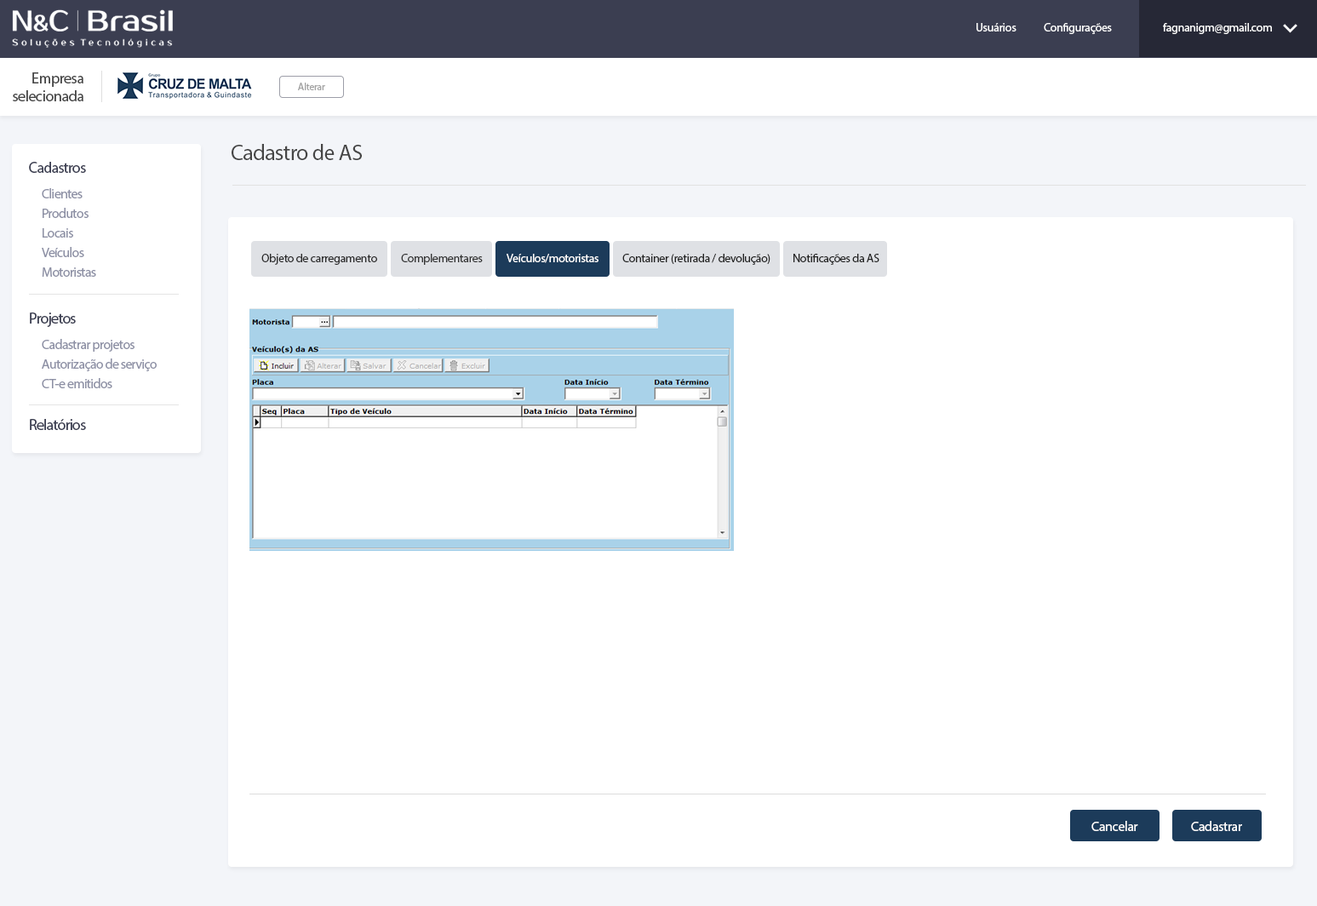
<style>
.page{position:relative;width:1317px;height:906px;background:#ffffff}
.page>*{position:absolute;margin:0}
.t1{font:11.9px "MyriadPro-Regular";letter-spacing:-0.025em;color:#ffffff}
.t2{font:15.3px/17.8px "MyriadPro-Regular";letter-spacing:-0.025em;color:#454545}
.t3{font:10.2px "MyriadPro-Regular";letter-spacing:-0.025em;color:#a2a2a2}
.t4{font:22.1px "MyriadPro-Regular";letter-spacing:-0.025em;color:#454545}
.t5{font:15.3px "MyriadPro-Regular";letter-spacing:-0.045em;color:#3b3e51}
.t6{font:13.6px "MyriadPro-Regular";letter-spacing:-0.045em;color:#8c8fa4}
.t7{font:11.9px "MyriadPro-Regular";letter-spacing:-0.025em;color:#2b2b2b}
.t8{font:11.9px "MyriadPro-Regular";letter-spacing:-0.025em;color:#333333}
.t9{font:11.9px "MyriadPro-Regular";letter-spacing:-0.025em;color:#222222}
.t10{font:13.6px "MyriadPro-Regular";letter-spacing:-0.045em;color:#8d90a5}
.t11{font:13.6px "MyriadPro-Regular";letter-spacing:-0.025em;color:#ffffff}
</style>
<div class="page">
<p class="t1" style="left:976px;top:23px;width:40px;height:8px">Usuários</p>
<p class="t1" style="left:1043px;top:23px;width:69px;height:11px">Configurações</p>
<p class="t1" style="left:1163px;top:23px;width:109px;height:11px">fagnanigm@gmail.com</p>
<p class="t2" style="left:13px;top:72px;width:70px;height:29px;text-align:right">Empresa<br>selecionada</p>
<p class="t3" style="left:298px;top:83px;width:27px;height:7px">Alterar</p>
<p class="t4" style="left:232px;top:144px;width:130px;height:16px">Cadastro de AS</p>
<p class="t5" style="left:29px;top:162px;width:57px;height:11px">Cadastros</p>
<p class="t6" style="left:42px;top:188px;width:41px;height:10px">Clientes</p>
<p class="t6" style="left:43px;top:208px;width:46px;height:10px">Produtos</p>
<p class="t6" style="left:43px;top:228px;width:30px;height:9px">Locais</p>
<p class="t6" style="left:42px;top:247px;width:42px;height:10px">Veículos</p>
<p class="t7" style="left:261px;top:254px;width:116px;height:11px">Objeto de carregamento</p>
<p class="t8" style="left:401px;top:254px;width:82px;height:11px">Complementares</p>
<p class="t1" style="left:506px;top:254px;width:92px;height:9px">Veículos/motoristas</p>
<p class="t9" style="left:622px;top:254px;width:148px;height:11px">Container (retirada / devolução)</p>
<p class="t9" style="left:793px;top:254px;width:86px;height:11px">Notificações da AS</p>
<p class="t6" style="left:42px;top:267px;width:54px;height:10px">Motoristas</p>
<p class="t5" style="left:30px;top:312px;width:46px;height:15px">Projetos</p>
<p class="t6" style="left:42px;top:339px;width:92px;height:13px">Cadastrar projetos</p>
<p class="t10" style="left:42px;top:358px;width:115px;height:13px">Autorização de serviço</p>
<p class="t6" style="left:42px;top:378px;width:70px;height:10px">CT-e emitidos</p>
<p class="t5" style="left:30px;top:419px;width:56px;height:11px">Relatórios</p>
<p class="t11" style="left:1091px;top:820px;width:47px;height:11px">Cancelar</p>
<p class="t11" style="left:1191px;top:820px;width:51px;height:11px">Cadastrar</p>
</div>
